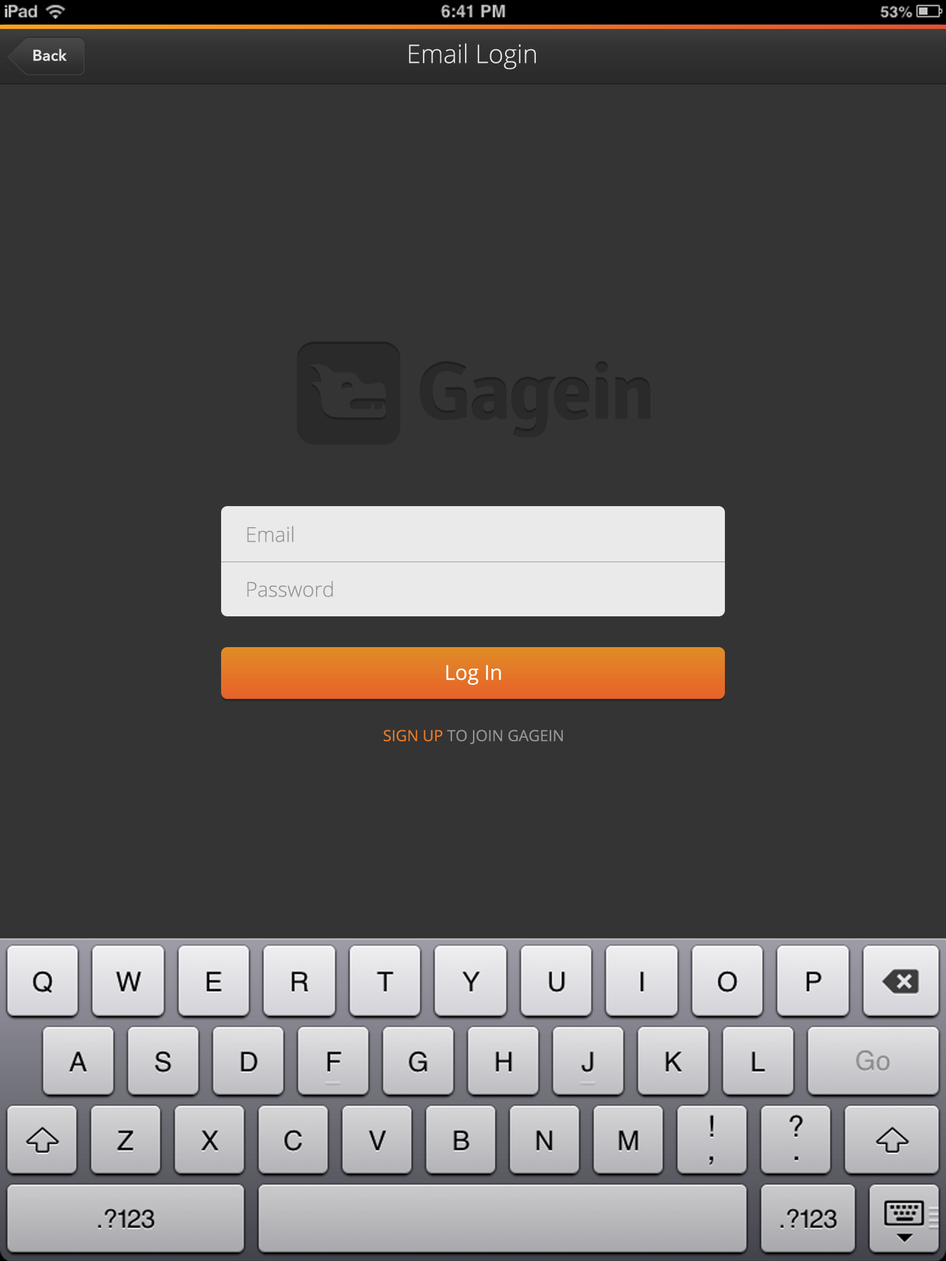
<style>
.page{position:relative;width:946px;height:1261px;background:#343434}
.page>*{position:absolute;margin:0}
.t1{font:15.4px "AvenirNext-DemiBold";color:#e5e5e5}
.t2{font:25.7px "OpenSans-Light";color:#e5e5e5}
.t3{font:20.5px "OpenSans-Light";color:#969696}
.t4{font:20.5px "OpenSans";color:#ffffff}
.t5{font:15.4px "OpenSans";color:#969696}
.t6{font:15.4px "OpenSans";color:#ec7a27}
</style>
<div class="page">
<p class="t1" style="left:33px;top:49px;width:34px;height:12px">Back</p>
<p class="t2" style="left:409px;top:43px;width:127px;height:27px">Email Login</p>
<p class="t3" style="left:247px;top:526px;width:47px;height:16px">Email</p>
<p class="t3" style="left:247px;top:581px;width:86px;height:16px">Password</p>
<p class="t4" style="left:446px;top:665px;width:55px;height:20px">Log In</p>
<p class="t5" style="left:384px;top:730px;width:179px;height:14px"><span class="t6">SIGN UP</span> TO JOIN GAGEIN</p>
</div>
